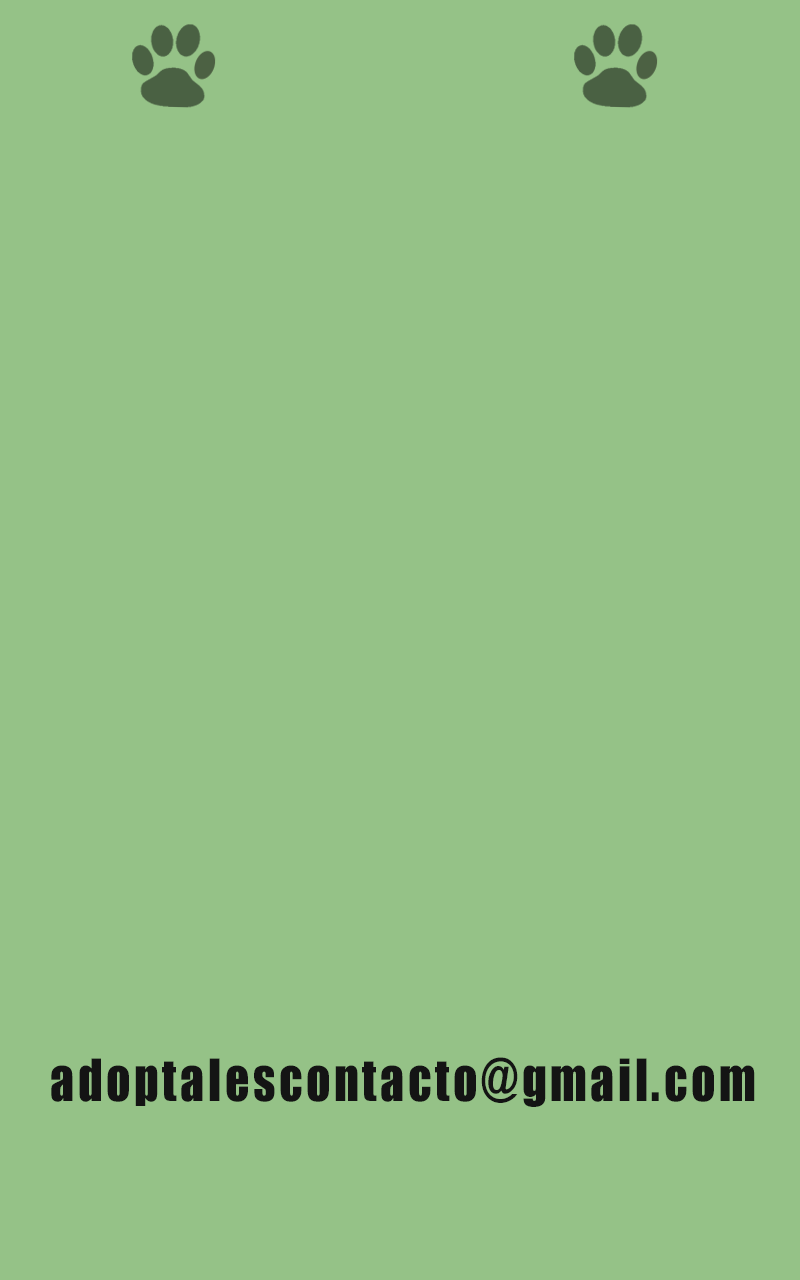
<style>
.page{position:relative;width:800px;height:1280px;background:#95c287}
.page>*{position:absolute;margin:0}
.t1{font:53.8px "Impact";letter-spacing:0.075em;color:#141414;scale:0.89 1}
</style>
<div class="page">
<p class="t1" style="left:51px;top:1057px;width:704px;height:50px">adoptalescontacto@gmail.com</p>
</div>
